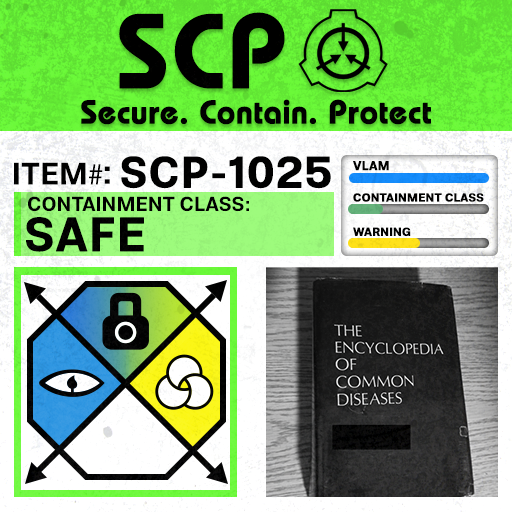
<style>
.page{position:relative;width:512px;height:512px}
.page>*{position:absolute;margin:0}
.t1{font:105.8px "BauhausLT-Demi";color:#000000;font-weight:bold}
.t2{font:33px "BauhausLT-Demi";color:#000000;font-weight:bold}
.t3{font:43.6px "Molde-Semibold";color:#000000;font-weight:bold}
.t4{font:12.5px "Molde-Semibold";color:#000000;font-weight:bold}
.t5{font:31.1px "Molde-Semibold";color:#000000}
.t6{font:31.1px "MyriadPro-Regular";color:#000000}
.t7{font:34.5px "Molde-Semibold";color:#000000}
.t8{font:20.3px "Molde-Semibold";color:#000000}
.t9{font:11.7px "Molde-Semibold";color:#000000;font-weight:bold}
.t10{font:47.8px "Molde-Semibold";color:#000000;font-weight:bold}
</style>
<div class="page">
<p class="t1" style="left:119px;top:12px;width:166px;height:77px">SCP</p>
<p class="t2" style="left:81px;top:99px;width:350px;height:26px">Secure. Contain. Protect</p>
<p class="t3" style="left:121px;top:156px;width:210px;height:33px">SCP-1025</p>
<p class="t4" style="left:353px;top:161px;width:36px;height:10px">VLAM</p>
<p class="t5" style="left:14px;top:162px;width:89px;height:23px">ITEM<span class="t6">#</span></p>
<p class="t7" style="left:104px;top:166px;width:6px;height:18px">:</p>
<p class="t8" style="left:28px;top:196px;width:221px;height:16px">CONTAINMENT CLASS:</p>
<p class="t9" style="left:353px;top:193px;width:131px;height:9px">CONTAINMENT CLASS</p>
<p class="t10" style="left:26px;top:217px;width:118px;height:35px">SAFE</p>
<p class="t9" style="left:353px;top:227px;width:58px;height:9px">WARNING</p>
</div>
